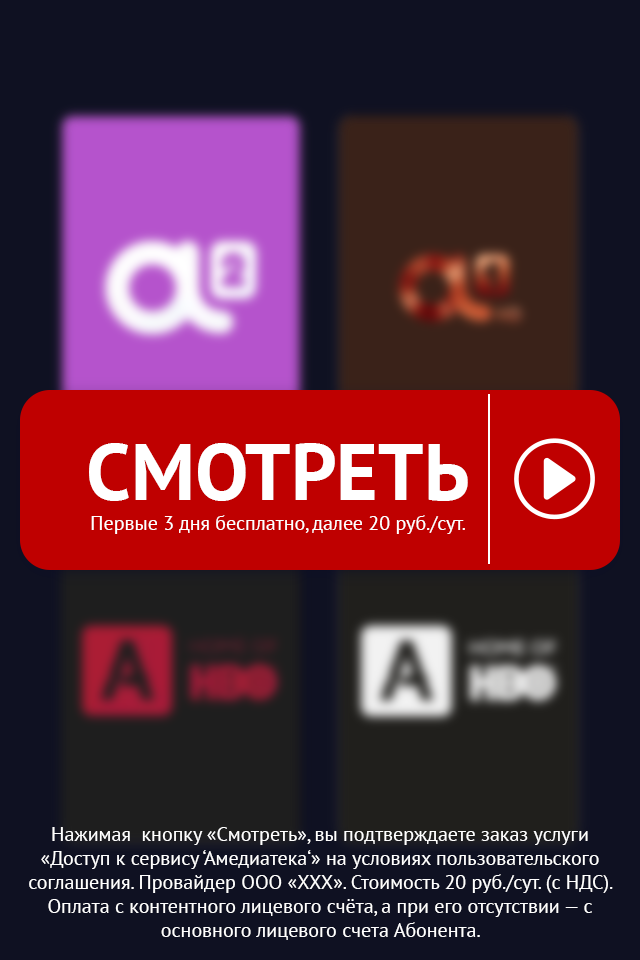
<style>
.page{position:relative;width:640px;height:960px;background:#0f1122}
.page>*{position:absolute;margin:0}
.t1{font:80px "PTSans-Bold";color:#ffffff;text-transform:uppercase}
.t2{font:20px "PTSans-Regular";color:#ffffff}
</style>
<div class="page">
<p class="t1" style="left:89px;top:443px;width:379px;height:58px">Смотреть</p>
<p class="t2" style="left:91px;top:515px;width:374px;height:19px">Первые 3 дня бесплатно, далее 20 руб./сут.</p>
<p class="t2" style="left:29px;top:827px;width:584px;height:113px;text-align:center">Нажимая  кнопку «Смотреть», вы подтверждаете заказ услуги «Доступ к сервису ‘Амедиатека‘» на условиях пользовательского соглашения. Провайдер ООО «ХХХ». Стоимость 20 руб./сут. (с НДС). Оплата с контентного лицевого счёта, а при его отсутствии — с основного лицевого счета Абонента.</p>
</div>
